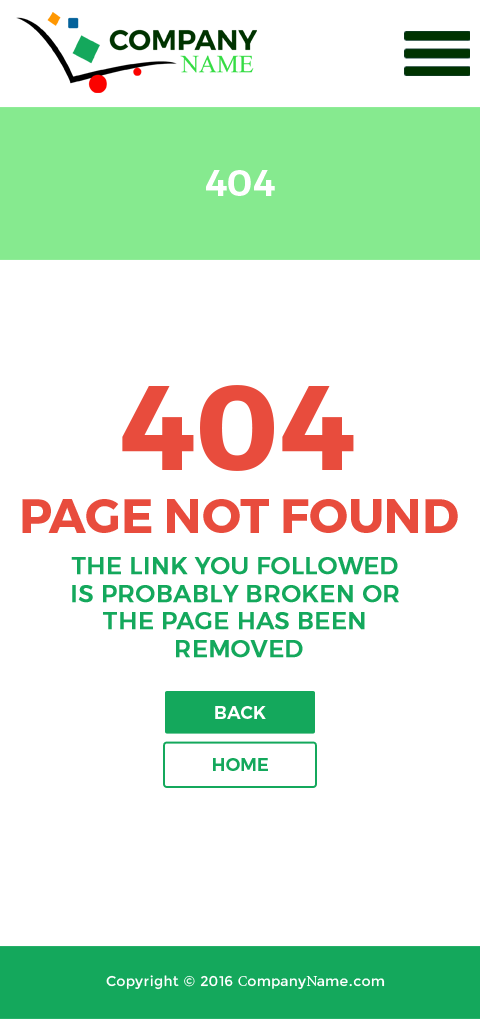
<style>
.page{position:relative;width:480px;height:1019px;background:#ffffff}
.page>*{position:absolute;margin:0}
.t1{font:36px "Montserrat-SemiBold";color:#ffffff;text-transform:uppercase}
.t2{font:120px "Montserrat-Bold";color:#e84c3d;text-transform:uppercase}
.t3{font:48px "Montserrat-Bold";color:#e84c3d;text-transform:uppercase}
.t4{font:24px/27.5px "Montserrat-Regular";color:#14a85c;font-weight:bold}
.t5{font:18px "Montserrat-SemiBold";color:#ffffff;text-transform:uppercase}
.t6{font:18px "Montserrat-SemiBold";color:#14a85c;text-transform:uppercase}
.t7{font:14px "Montserrat-Regular";letter-spacing:0.025em;color:#ffffff}
.t8{font:14px "MinionPro-Regular";letter-spacing:0.025em;color:#ffffff}
</style>
<div class="page">
<p class="t1" style="left:206px;top:170px;width:69px;height:26px">404</p>
<p class="t2" style="left:122px;top:385px;width:232px;height:86px">404</p>
<p class="t3" style="left:22px;top:499px;width:436px;height:34px">Page not found</p>
<p class="t4" style="left:71px;top:557px;width:328px;height:101px;text-align:center">THE LINK YOU FOLLOWED<br> IS PROBABLY BROKEN OR <br>THE PAGE HAS BEEN<br> REMOVED</p>
<p class="t5" style="left:215px;top:706px;width:51px;height:13px">Back</p>
<p class="t6" style="left:213px;top:758px;width:55px;height:13px">home</p>
<p class="t7" style="left:106px;top:975px;width:279px;height:15px">Copyright © 2016 <span class="t8">C</span>ompany<span class="t8">N</span>ame.com</p>
</div>
